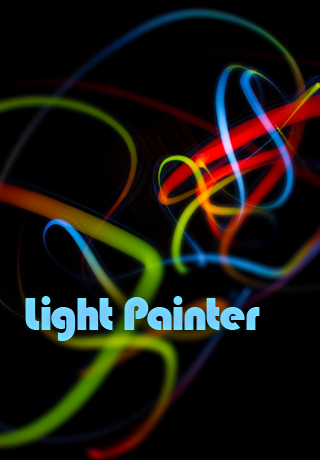
<style>
.page{position:relative;width:320px;height:460px;background:#000000}
.page>*{position:absolute;margin:0}
.t1{font:48px "Bauhaus93";letter-spacing:-0.03em;color:#79c3fe}
.t2{font:48px "Bauhaus93";letter-spacing:-0.05em;color:#79c3fe}
.t3{font:48px "Bauhaus93";letter-spacing:-0.04em;color:#79c3fe}
.t4{font:48px "Bauhaus93";letter-spacing:-0.053em;color:#79c3fe}
.t5{font:48px "Bauhaus93";letter-spacing:-0.02em;color:#79c3fe}
</style>
<div class="page">
<p class="t1" style="left:25px;top:296px;width:235px;height:45px">Li<span class="t2">g</span><span class="t3">h</span><span class="t2">t </span>P<span class="t4">a</span><span class="t2">in</span>t<span class="t5">e</span><span class="t2">r</span></p>
</div>
